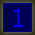
<style>
.page{position:relative;width:35px;height:35px;background:#000055}
.page>*{position:absolute;margin:0}
.t1{font:30px "Courier";letter-spacing:0.018em;color:#0000ff}
</style>
<div class="page">
<p class="t1" style="left:13px;top:8px;width:10px;height:19px">1</p>
</div>
